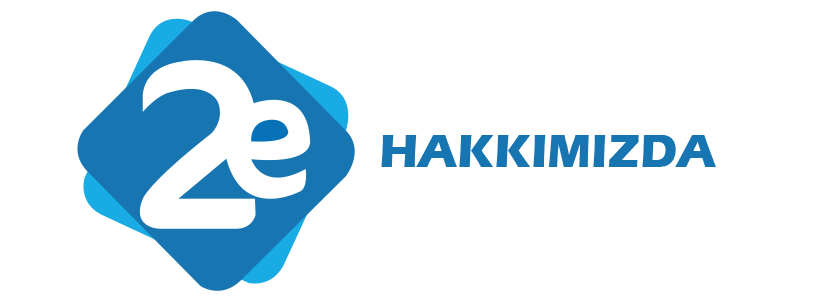
<style>
.page{position:relative;width:838px;height:300px;background:#ffffff}
.page>*{position:absolute;margin:0}
.t1{font:48px "ErasITC-Bold";color:#1776b1}
</style>
<div class="page">
<p class="t1" style="left:381px;top:135px;width:335px;height:32px">HAKKIMIZDA</p>
</div>
